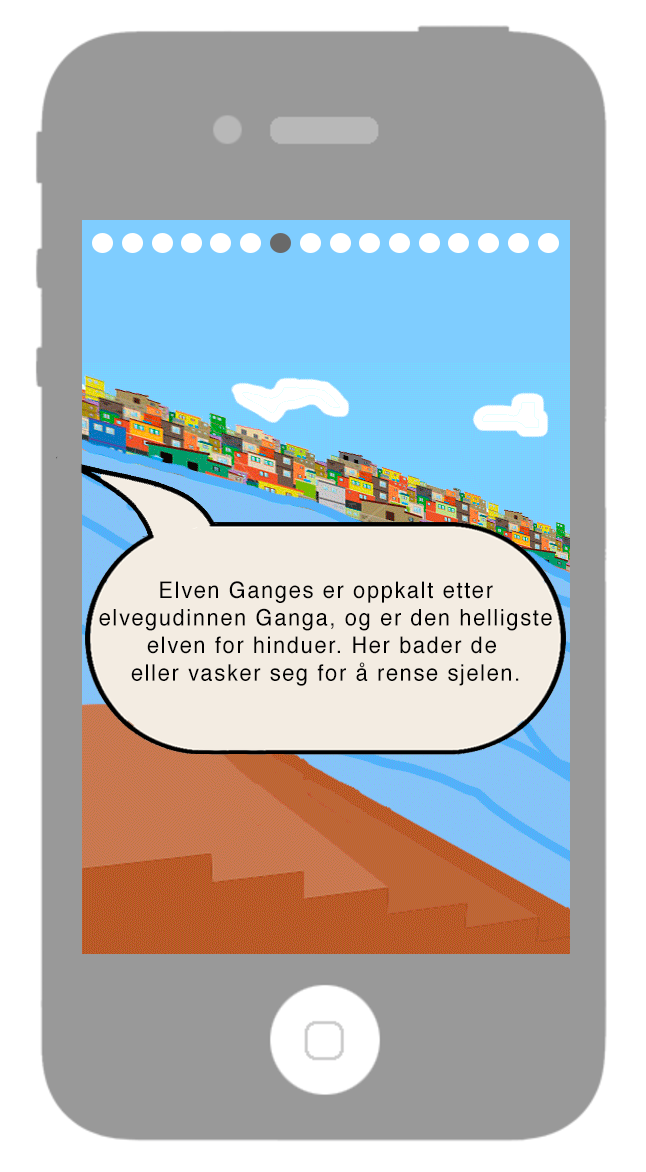
<style>
.page{position:relative;width:646px;height:1172px;background:#999999}
.page>*{position:absolute;margin:0}
.t1{font:11px "Helvetica";letter-spacing:0.075em;color:#010101;scale:0.95 1}
</style>
<div class="page">
<p class="t1" style="left:99px;top:581px;width:453px;height:105px;text-align:center">Elven Ganges er oppkalt etter<br>elvegudinnen Ganga, og er den helligste<br>elven for hinduer. Her bader de <br>eller vasker seg for å rense sjelen.</p>
</div>
